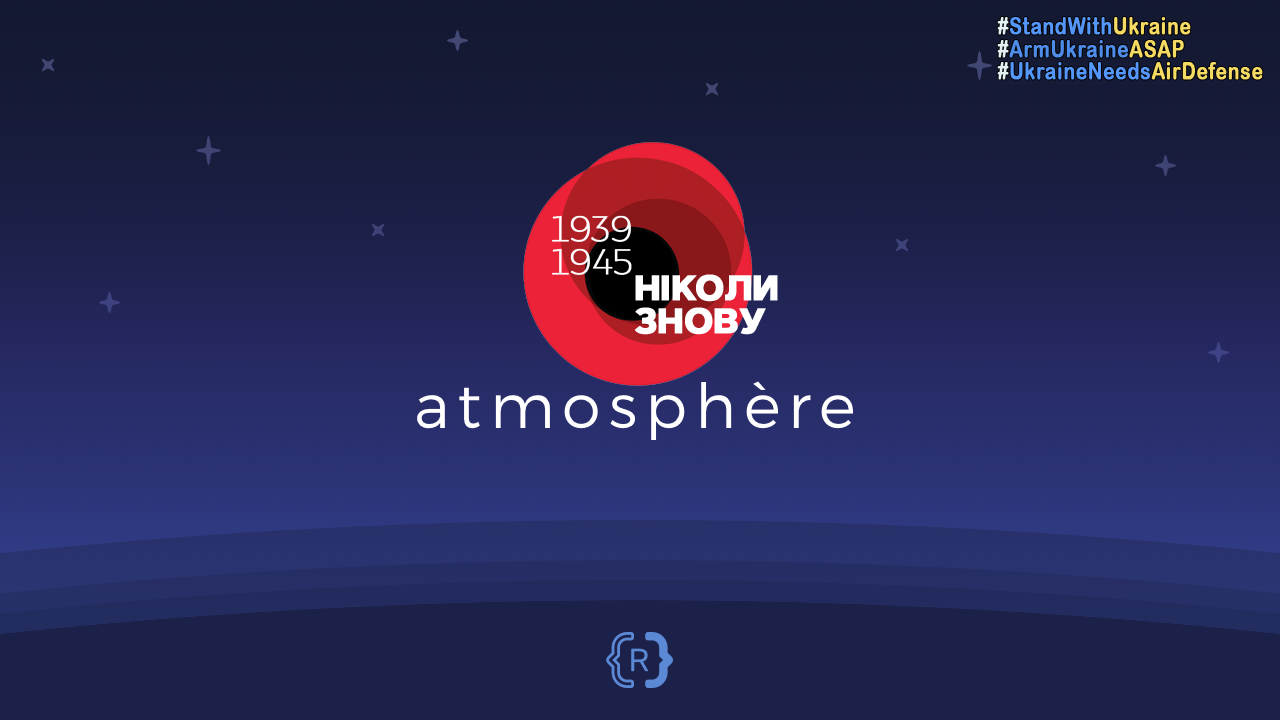
<style>
.page{position:relative;width:1280px;height:720px}
.page>*{position:absolute;margin:0}
.t1{font:24.4px "ArialRoundedMTBold";color:#5496fa;font-weight:bold;scale:0.77 1}
.t2{font:24.4px "ArialRoundedMTBold";color:#ff0000;font-weight:bold;scale:0.77 1}
.t3{font:24.4px "ArialRoundedMTBold";color:#e3f0f4;font-weight:bold;scale:0.77 1}
.t4{font:24.4px "ArialRoundedMTBold";color:#f5db64;font-weight:bold;scale:0.77 1}
.t5{font:24.4px "ArialRoundedMTBold";color:#4e8ce9;font-weight:bold;scale:0.77 1}
.t6{font:35.4px "CorsaGrotesk-Thin";color:#ffffff;font-weight:bold}
.t7{font:35.4px "ArtegraSans-ExtraBold";color:#ffffff;font-weight:bold}
</style>
<div class="page">
<p class="t1" style="left:997px;top:17px;width:266px;height:63px"><span class="t2"> </span><span class="t3">#</span>StandWith<span class="t4">Ukraine<br> </span><span class="t3">#</span><span class="t5">ArmUkraine</span><span class="t4">ASAP<br> </span><span class="t3">#</span>UkraineNeeds<span class="t4">AirDefense</span></p>
<p class="t6" style="left:552px;top:215px;width:80px;height:60px">1939<br>1945</p>
<p class="t7" style="left:635px;top:274px;width:143px;height:61px">НІКОЛИ <br>ЗНОВУ</p>
</div>
